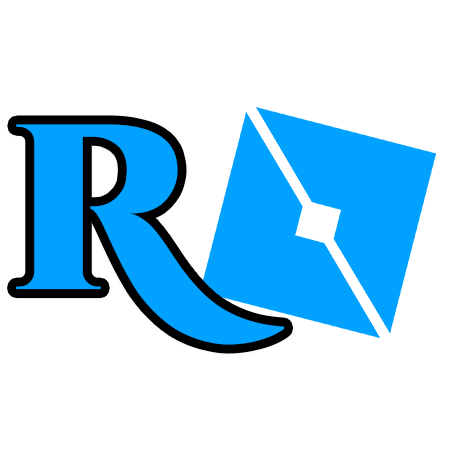
<style>
.page{position:relative;width:449px;height:450px;background:#ffffff}
.page>*{position:absolute;margin:0}
.t1{font:234.7px "CinzelDecorative-Black";color:#00a1ff}
</style>
<div class="page">
<p class="t1" style="left:16px;top:124px;width:268px;height:221px">R</p>
</div>
